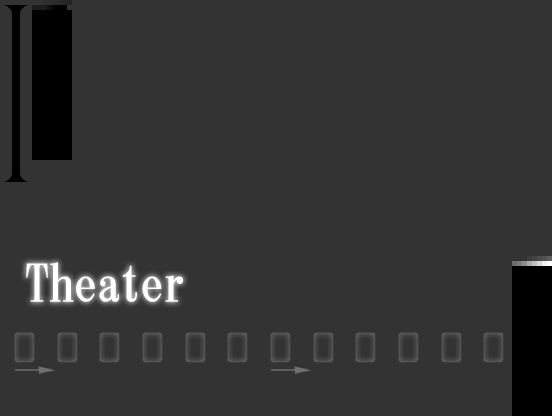
<style>
.page{position:relative;width:552px;height:416px;background:#333333}
.page>*{position:absolute;margin:0}
.t1{font:52px "HGMinchoB";letter-spacing:-0.025em;color:#ffffff}
</style>
<div class="page">
<p class="t1" style="left:26px;top:262px;width:157px;height:40px">Theater</p>
</div>
